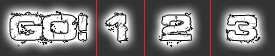
<style>
.page{position:relative;width:275px;height:56px;background:#333333}
.page>*{position:absolute;margin:0}
.t1{font:36px "Defused-ExtendedBold";color:#ffffff}
</style>
<div class="page">
<p class="t1" style="left:10px;top:11px;width:250px;height:36px">GO! 1  2  3</p>
</div>
